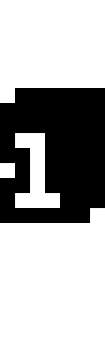
<style>
.page{position:relative;width:105px;height:344px;background:#ffffff}
.page>*{position:absolute;margin:0}
.t1{font:240px "Pixeliza20";color:#000000}
</style>
<div class="page">
<p class="t1" style="left:0px;top:88px;width:105px;height:135px">1</p>
</div>
